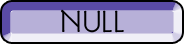
<style>
.page{position:relative;width:184px;height:44px;background:#b7b0d8}
.page>*{position:absolute;margin:0}
.t1{font:36px "PykesPeakZero";color:#000000}
</style>
<div class="page">
<p class="t1" style="left:61px;top:9px;width:63px;height:24px">NULL</p>
</div>
